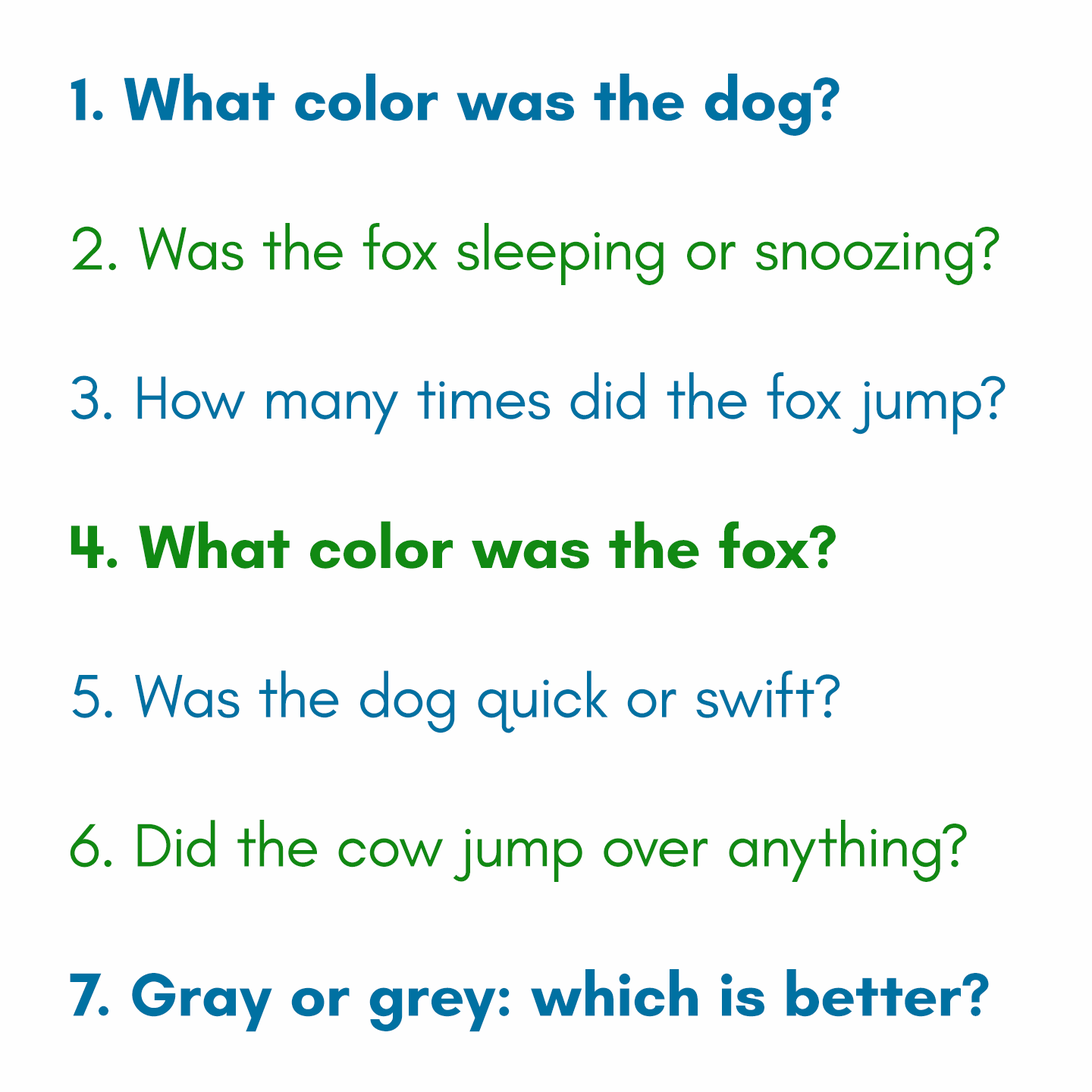
<style>
.page{position:relative;width:1092px;height:1092px;background:#fefefe}
.page>*{position:absolute;margin:0}
.t1{font:62.2px "Teachers-Regular";color:#118913}
.t2{font:62.2px "Teachers-Bold";color:#0071a2}
.t3{font:62.2px "Teachers-Regular";color:#0071a2}
.t4{font:62.2px "Teachers-Bold";color:#118913}
</style>
<div class="page">
<p class="t1" style="left:70px;top:74px;width:936px;height:958px"><span class="t2">What color was the dog?<br></span><br>2. Was the fox sleeping or snoozing?<br><span class="t3"><br>3. How many times did the fox jump?<br></span><span class="t4"><br>4. What color was the fox?<br></span><span class="t3"><br>5. Was the dog quick or swift?<br></span><br>6. Did the cow jump over anything?<br><br><span class="t2">7. Gray or grey: which is better?</span></p>
</div>
